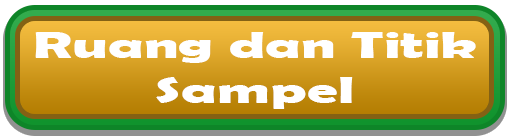
<style>
.page{position:relative;width:510px;height:138px}
.page>*{position:absolute;margin:0}
.t1{font:37.5px "BerlinSansFBDemi-Bold";color:#ffffff;scale:1.64 1}
</style>
<div class="page">
<p class="t1" style="left:35px;top:32px;width:441px;height:77px;text-align:center">Ruang dan Titik<br>Sampel</p>
</div>
